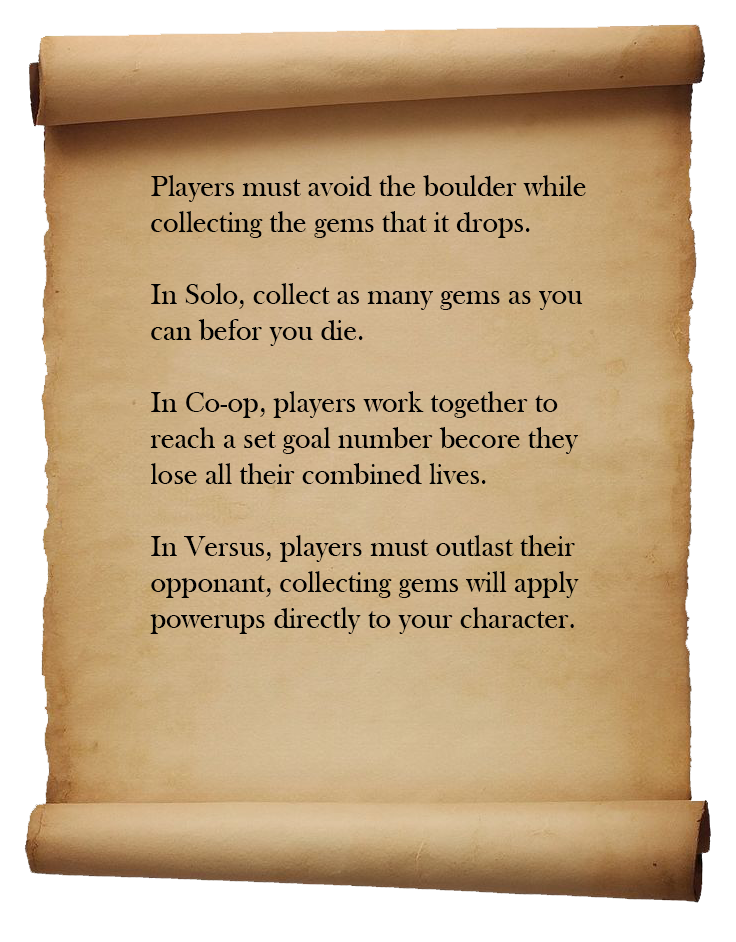
<style>
.page{position:relative;width:736px;height:942px}
.page>*{position:absolute;margin:0}
.t1{font:30px "BaskOldFace";color:#000000}
</style>
<div class="page">
<p class="t1" style="left:150px;top:175px;width:436px;height:459px">Players must avoid the boulder while<br>collecting the gems that it drops.<br><br>In Solo, collect as many gems as you <br>can befor you die.<br><br>In Co-op, players work together to <br>reach a set goal number becore they <br>lose all their combined lives.<br><br>In Versus, players must outlast their <br>opponant, collecting gems will apply <br>powerups directly to your character.</p>
</div>
